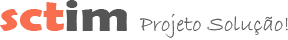
<style>
.page{position:relative;width:288px;height:40px;background:#ffffff}
.page>*{position:absolute;margin:0}
.t1{font:44.9px "BerlinSansFBDemi-Bold";color:#f86e4e;scale:1.26 1}
.t2{font:44.9px "BerlinSansFBDemi-Bold";color:#555555;scale:1.26 1}
.t3{font:21.7px "BradleyHandITC";color:#555555;scale:1.05 1}
</style>
<div class="page">
<p class="t1" style="left:0px;top:0px;width:127px;height:31px">sct<span class="t2">im</span></p>
<p class="t3" style="left:140px;top:13px;width:148px;height:25px">Projeto Solução!</p>
</div>
